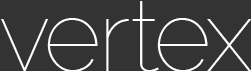
<style>
.page{position:relative;width:251px;height:71px;background:#333333}
.page>*{position:absolute;margin:0}
.t1{font:100px "Raleway-Thin";color:#ffffff}
</style>
<div class="page">
<p class="t1" style="left:1px;top:1px;width:251px;height:71px">vertex</p>
</div>
